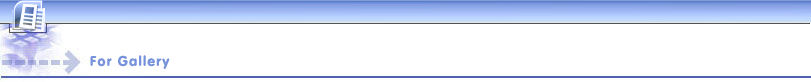
<style>
.page{position:relative;width:811px;height:82px;background:#ffffff}
.page>*{position:absolute;margin:0}
.t1{font:14px "FZY4JW--GB1-0";letter-spacing:0.1em;color:#7793dc}
</style>
<div class="page">
<p class="t1" style="left:90px;top:55px;width:80px;height:14px">For Gallery</p>
</div>
